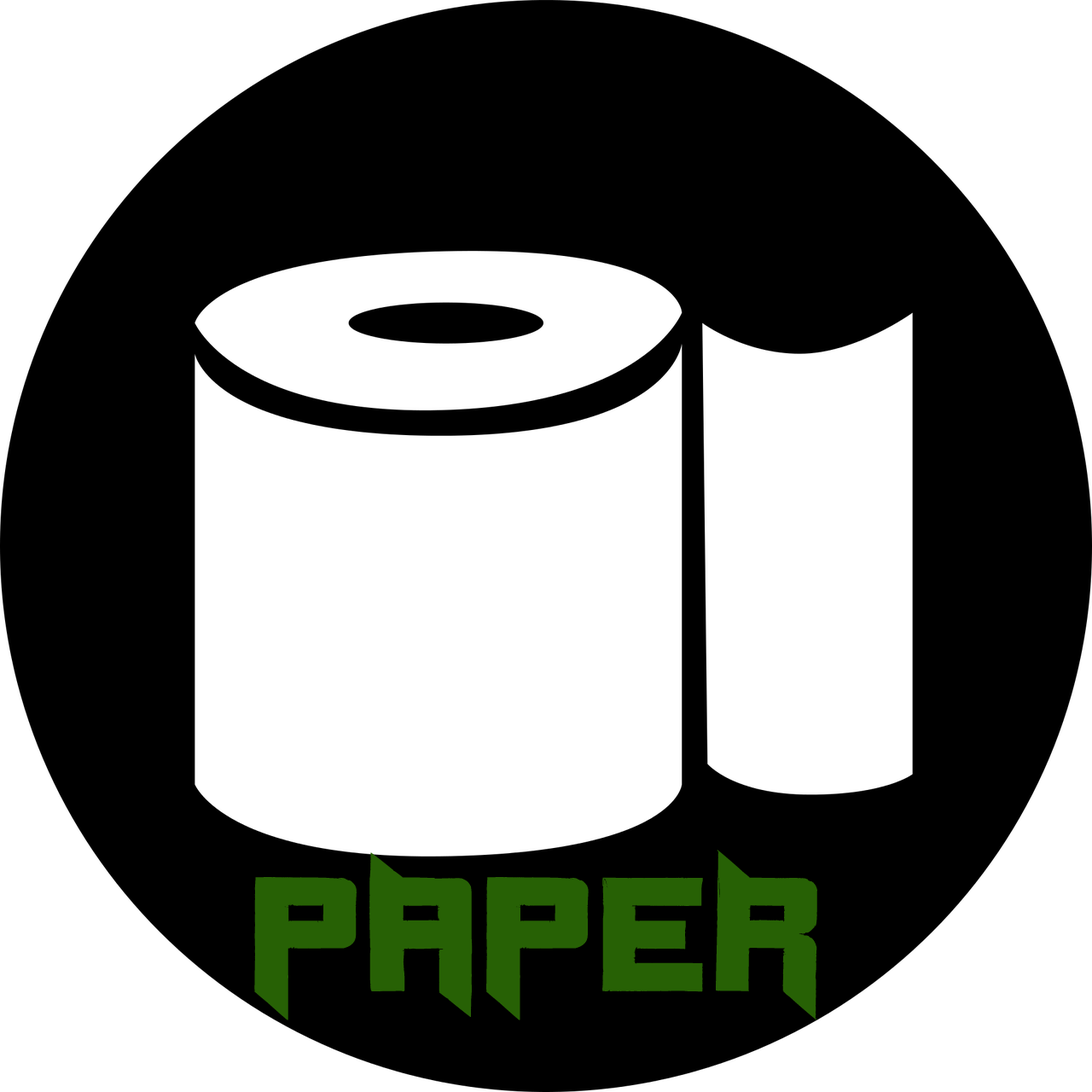
<style>
.page{position:relative;width:1092px;height:1092px;background:#ffffff}
.page>*{position:absolute;margin:0}
.t1{font:162.4px "Duplexide";color:#276105;scale:1.18 1}
</style>
<div class="page">
<p class="t1" style="left:254px;top:850px;width:563px;height:170px">PAPER</p>
</div>
